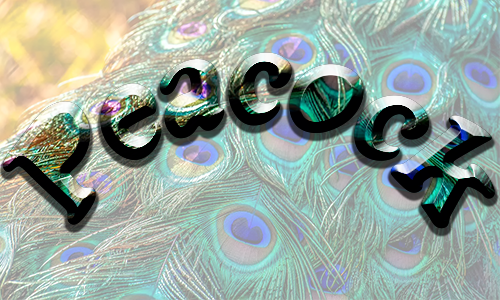
<style>
.page{position:relative;width:500px;height:300px}
.page>*{position:absolute;margin:0}
.t1{font:146.3px "CooperBlack";letter-spacing:0.01em;font-style:italic;scale:0.4 1}
</style>
<div class="page">
<p class="t1" style="left:3px;top:52px;width:492px;height:177px">Peacock</p>
</div>
